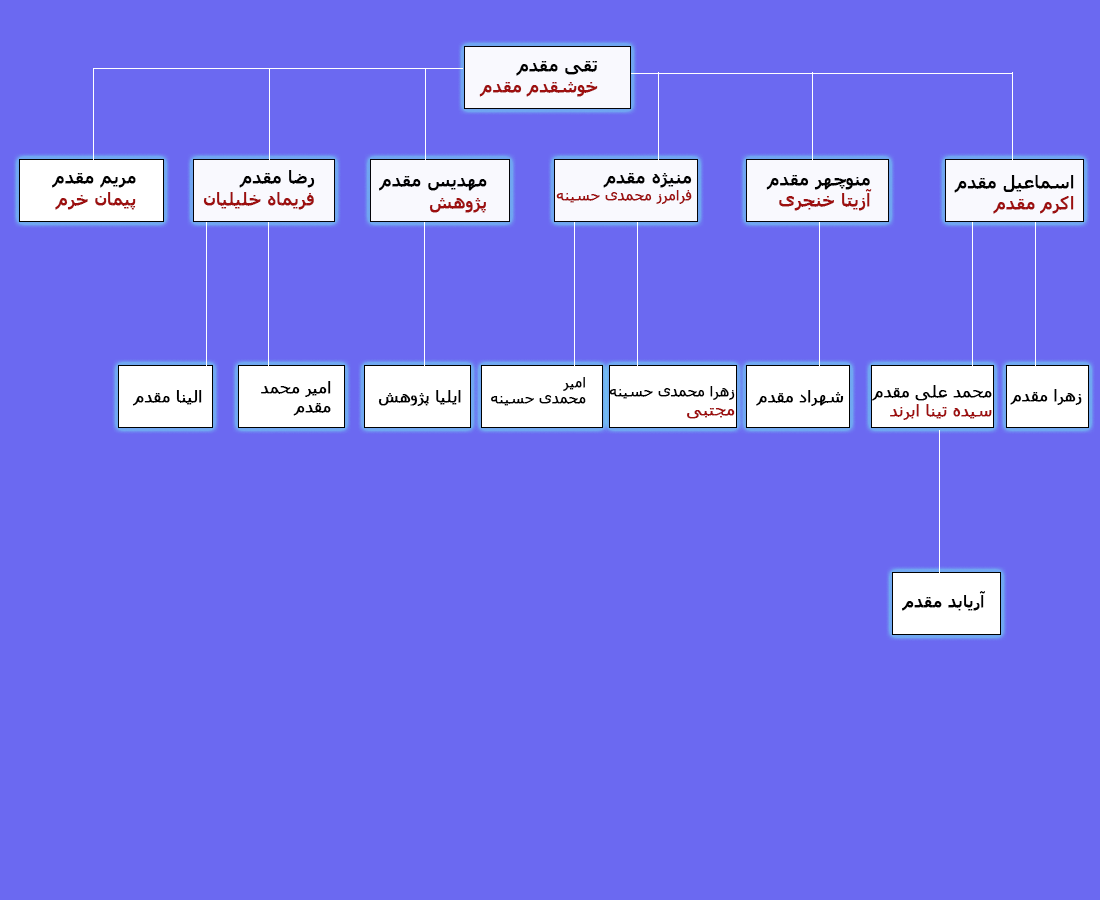
<style>
.page{position:relative;width:1100px;height:900px;background:#6b69f1}
.page>*{position:absolute;margin:0}
.t1{font:18px "Tahoma";color:#9d0f0f;font-weight:bold}
.t2{font:18px "Tahoma";color:#000000;font-weight:bold}
.t3{font:14px "Tahoma";color:#9d0f0f;font-weight:bold}
.t4{font:14px "Tahoma";color:#000000;font-weight:bold}
.t5{font:16px "Tahoma";color:#000000;font-weight:bold}
.t6{font:16px "Tahoma";color:#9d0f0f;font-weight:bold}
.t7{font:17px "Tahoma";color:#000000;font-weight:bold}
</style>
<div class="page">
<p class="t1" style="left:479px;top:61px;width:119px;height:36px;text-align:right"><span class="t2">تقی مقدم<br></span>خوشقدم مقدم</p>
<p class="t2" style="left:52px;top:173px;width:84px;height:37px;text-align:right">مریم مقدم<br><span class="t1">پیمان خرم</span></p>
<p class="t1" style="left:203px;top:170px;width:112px;height:40px;text-align:right"><span class="t2">رضا مقدم<br></span>فریماه خلیلیان</p>
<p class="t3" style="left:556px;top:173px;width:136px;height:31px;text-align:right"><span class="t2">منیژه مقدم<br></span>فرامرز محمدی حسینه</p>
<p class="t2" style="left:379px;top:176px;width:108px;height:37px;text-align:right">مهدیس مقدم<br><span class="t1">پژوهش</span></p>
<p class="t2" style="left:766px;top:175px;width:106px;height:36px;text-align:right">منوچهر مقدم<br><span class="t1">آزیتا خنجری</span></p>
<p class="t2" style="left:954px;top:175px;width:120px;height:39px;text-align:right">اسماعیل مقدم<br><span class="t1">اکرم مقدم</span></p>
<p class="t4" style="left:491px;top:377px;width:95px;height:29px;text-align:right">امیر<br>محمدی حسینه</p>
<p class="t5" style="left:132px;top:390px;width:70px;height:16px">الینا مقدم</p>
<p class="t5" style="left:261px;top:381px;width:70px;height:35px;text-align:right">امیر محمد<br> مقدم</p>
<p class="t5" style="left:378px;top:390px;width:83px;height:16px">ایلیا پژوهش</p>
<p class="t4" style="left:609px;top:386px;width:126px;height:33px;text-align:right">زهرا محمدی حسینه<br><span class="t6">مجتبی</span></p>
<p class="t5" style="left:756px;top:390px;width:88px;height:16px">شهراد مقدم</p>
<p class="t6" style="left:872px;top:385px;width:120px;height:35px;text-align:right"><span class="t5">محمد علی مقدم<br></span>سیده تینا ابرند</p>
<p class="t5" style="left:1010px;top:389px;width:72px;height:16px">زهرا مقدم</p>
<p class="t7" style="left:902px;top:591px;width:83px;height:20px">آریابد مقدم</p>
</div>
